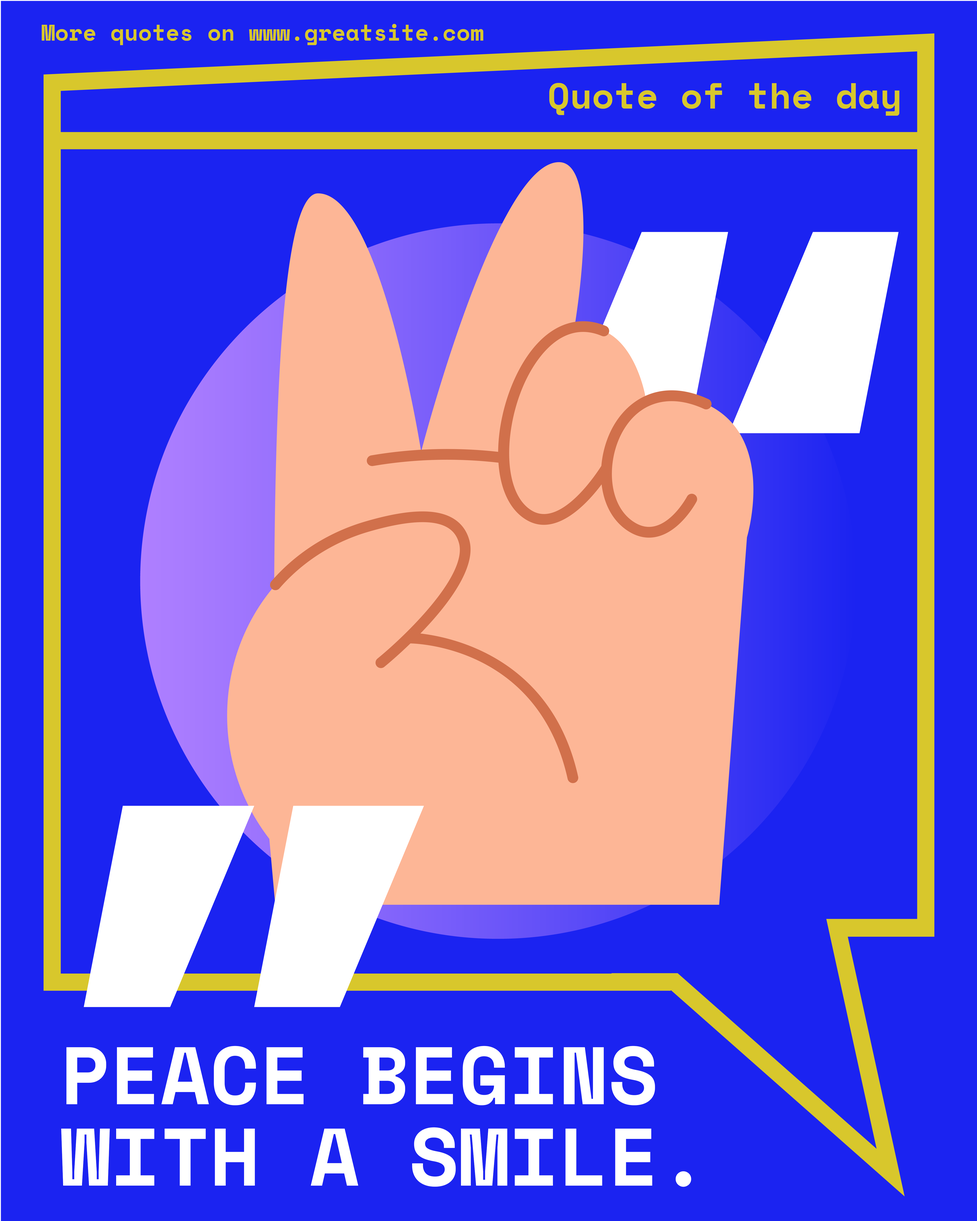
<style>
.page{position:relative;width:977px;height:1221px;background:#1b23f1}
.page>*{position:absolute;margin:0}
.t1{font:22.6px "SpaceMono-Bold";color:#d8c72c}
.t2{font:36.2px "SpaceMono-Bold";color:#d8c72c}
.t3{font:750.6px "Poppins-Bold";color:#ffffff}
.t4{font:81.4px/81.4px "SpaceMono-Bold";color:#ffffff}
</style>
<div class="page">
<p class="t1" style="left:42px;top:24px;width:441px;height:21px">More quotes on www.greatsite.com</p>
<p class="t2" style="left:549px;top:83px;width:350px;height:33px">Quote of the day</p>
<p class="t3" style="left:557px;top:232px;width:341px;height:201px">“</p>
<p class="t3" style="left:84px;top:806px;width:340px;height:201px">„</p>
<p class="t4" style="left:61px;top:1046px;width:630px;height:141px">PEACE BEGINS WITH A SMILE.</p>
</div>
